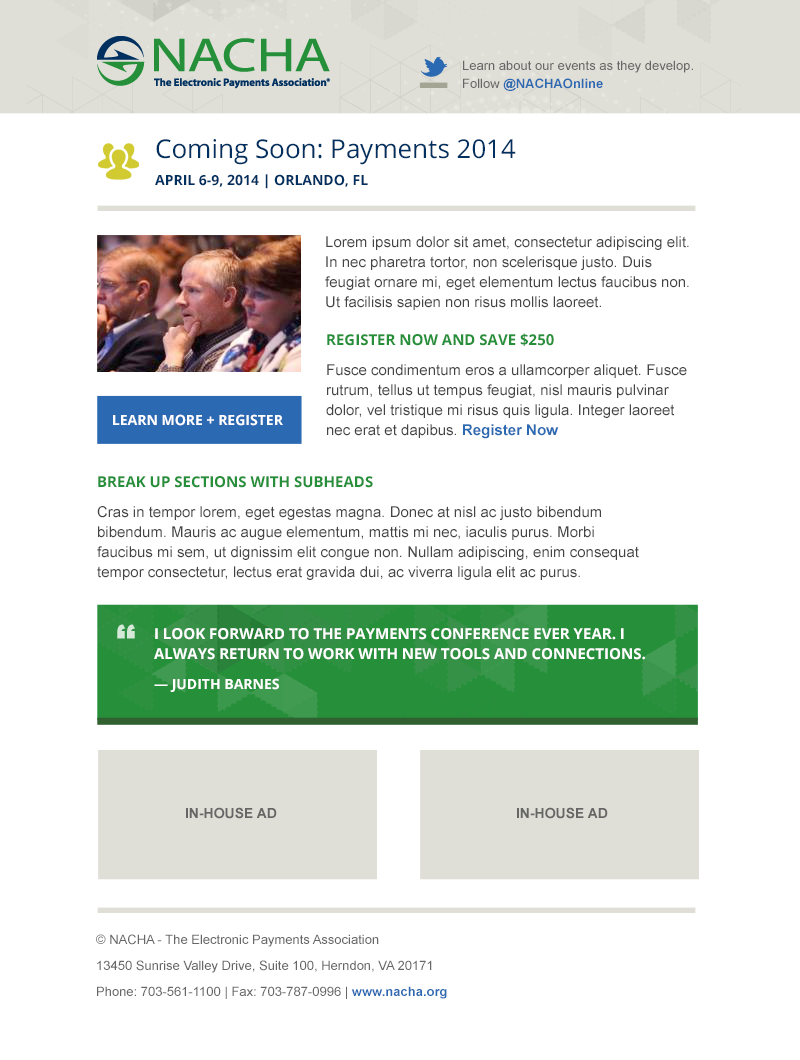
<style>
.page{position:relative;width:800px;height:1060px;background:#ffffff}
.page>*{position:absolute;margin:0}
.t1{font:13px/18px "ArialMT";color:#666666}
.t2{font:13px/18px "Arial-BoldMT";color:#2b69b2}
.t3{font:14px "OpenSans-Bold";color:#003060;text-transform:uppercase}
.t4{font:26px "OpenSans";color:#003060}
.t5{font:15px/20px "ArialMT";color:#444444}
.t6{font:15px/20px "OpenSans-Bold";color:#258f39;text-transform:uppercase}
.t7{font:15px/20px "Arial-BoldMT";color:#2b69b2}
.t8{font:14px "OpenSans-Bold";color:#ffffff;text-transform:uppercase}
.t9{font:52px "Oswald-Bold";color:#d5e9d9;text-transform:uppercase}
.t10{font:15px/20px "OpenSans-Bold";color:#ffffff;text-transform:uppercase}
.t11{font:14px/20px "OpenSans-Bold";color:#ffffff;text-transform:uppercase}
.t12{font:14px "Arial-BoldMT";color:#666666;text-transform:uppercase}
.t13{font:13px "ArialMT";color:#666666}
.t14{font:13px "Arial-BoldMT";color:#2b69b2}
</style>
<div class="page">
<p class="t1" style="left:463px;top:60px;width:230px;height:31px">Learn about our events as they develop.<br>Follow <span class="t2">@NACHAOnline</span></p>
<p class="t3" style="left:155px;top:139px;width:361px;height:50px"><span class="t4">Coming Soon: Payments 2014<br></span>april 6-9, 2014 | orlando, FL</p>
<p class="t5" style="left:325px;top:236px;width:364px;height:74px">Lorem ipsum dolor sit amet, consectetur adipiscing elit. In nec pharetra tortor, non scelerisque justo. Duis feugiat ornare mi, eget elementum lectus faucibus non. Ut facilisis sapien non risus mollis laoreet.</p>
<p class="t5" style="left:326px;top:333px;width:361px;height:106px"><span class="t6">register now and save $250<br></span>Fusce condimentum eros a ullamcorper aliquet. Fusce rutrum, tellus ut tempus feugiat, nisl mauris pulvinar dolor, vel tristique mi risus quis ligula. Integer laoreet nec erat et dapibus. <span class="t7">Register Now</span></p>
<p class="t8" style="left:113px;top:414px;width:170px;height:12px">Learn More + Register</p>
<p class="t5" style="left:97px;top:476px;width:542px;height:104px"><span class="t6">break up sections with subheads<br></span>Cras in tempor lorem, eget egestas magna. Donec at nisl ac justo bibendum bibendum. Mauris ac augue elementum, mattis mi nec, iaculis purus. Morbi faucibus mi sem, ut dignissim elit congue non. Nullam adipiscing, enim consequat tempor consectetur, lectus erat gravida dui, ac viverra ligula elit ac purus.</p>
<p class="t9" style="left:117px;top:624px;width:18px;height:15px">“</p>
<p class="t10" style="left:154px;top:628px;width:491px;height:64px">I look forward to the Payments conference ever year. i always return to work with new tools and connections.<br><span class="t11">— judith barnes</span></p>
<p class="t12" style="left:186px;top:807px;width:91px;height:12px">In-House Ad</p>
<p class="t12" style="left:517px;top:807px;width:91px;height:12px">In-House Ad</p>
<p class="t13" style="left:96px;top:934px;width:351px;height:65px">© NACHA - The Electronic Payments Association<br>13450 Sunrise Valley Drive, Suite 100, Herndon, VA 20171<br>Phone: 703-561-1100 | Fax: 703-787-0996 | <span class="t14">www.nacha.org</span></p>
</div>
